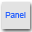
<style>
.page{position:relative;width:32px;height:32px;background:#e3e3e3}
.page>*{position:absolute;margin:0}
.t1{font:8px "ArialMT";color:#2962fe}
</style>
<div class="page">
<p class="t1" style="left:5px;top:12px;width:21px;height:6px">Panel</p>
</div>
